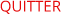
<style>
.page{position:relative;width:61px;height:14px;background:#ffffff}
.page>*{position:absolute;margin:0}
.t1{font:15px "OpenSans";color:#e40a0a}
</style>
<div class="page">
<p class="t1" style="left:0px;top:0px;width:61px;height:14px">QUITTER</p>
</div>
